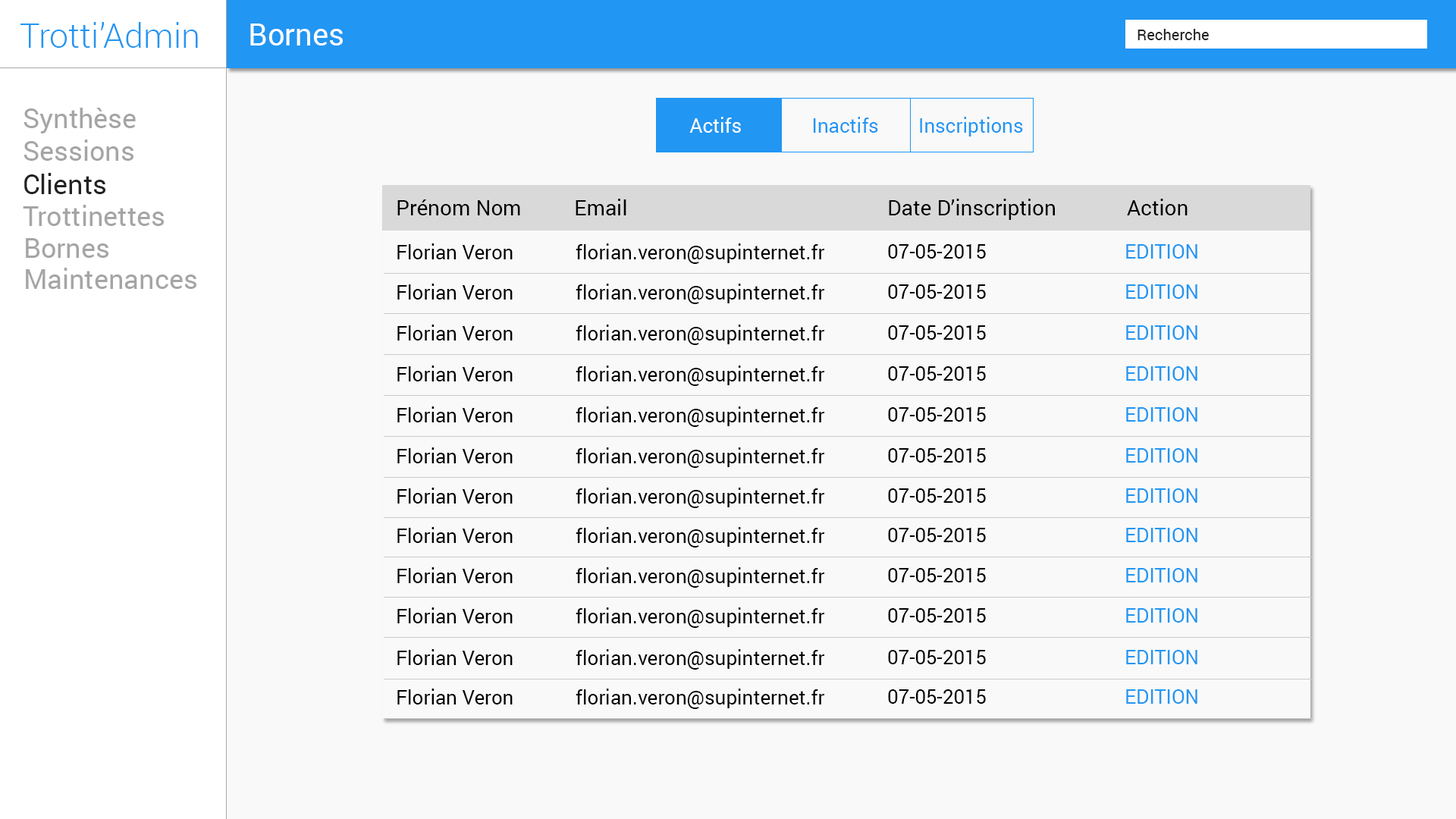
<style>
.page{position:relative;width:1456px;height:819px;background:#f9f9f9}
.page>*{position:absolute;margin:0}
.t1{font:34.1px "Roboto-Light";color:#2196f3}
.t2{font:30.3px "Roboto-Regular";color:#ffffff}
.t3{font:15.2px "Roboto-Regular";color:#222222}
.t4{font:27.3px "Roboto-Regular";color:#a5a5a5}
.t5{font:19.7px "Roboto-Regular";color:#ffffff}
.t6{font:19.7px "Roboto-Regular";color:#2196f3}
.t7{font:27.3px "Roboto-Regular";color:#222222}
.t8{font:21.2px "Roboto-Regular";color:#010101}
.t9{font:19.7px "Roboto-Regular";color:#000000}
</style>
<div class="page">
<p class="t1" style="left:20px;top:22px;width:178px;height:26px">Trotti’Admin</p>
<p class="t2" style="left:250px;top:24px;width:93px;height:21px">Bornes</p>
<p class="t3" style="left:1137px;top:29px;width:72px;height:11px">Recherche</p>
<p class="t4" style="left:24px;top:108px;width:112px;height:25px">Synthèse</p>
<p class="t5" style="left:689px;top:117px;width:52px;height:16px">Actifs</p>
<p class="t6" style="left:813px;top:117px;width:65px;height:16px">Inactifs</p>
<p class="t6" style="left:920px;top:117px;width:103px;height:19px">Inscriptions</p>
<p class="t4" style="left:24px;top:140px;width:109px;height:21px">Sessions</p>
<p class="t7" style="left:24px;top:173px;width:81px;height:21px">Clients</p>
<p class="t4" style="left:23px;top:205px;width:141px;height:21px">Trottinettes</p>
<p class="t8" style="left:397px;top:199px;width:123px;height:16px">Prénom Nom</p>
<p class="t8" style="left:576px;top:199px;width:50px;height:16px">Email</p>
<p class="t8" style="left:889px;top:199px;width:166px;height:21px">Date D’inscription</p>
<p class="t8" style="left:1127px;top:199px;width:61px;height:16px">Action</p>
<p class="t4" style="left:26px;top:238px;width:82px;height:20px">Bornes</p>
<p class="t9" style="left:397px;top:243px;width:116px;height:16px">Florian Veron</p>
<p class="t9" style="left:576px;top:243px;width:249px;height:21px">florian.veron@supinternet.fr</p>
<p class="t9" style="left:888px;top:244px;width:98px;height:15px">07-05-2015</p>
<p class="t6" style="left:1126px;top:244px;width:71px;height:15px">EDITION</p>
<p class="t4" style="left:26px;top:268px;width:170px;height:21px">Maintenances</p>
<p class="t9" style="left:397px;top:284px;width:116px;height:16px">Florian Veron</p>
<p class="t9" style="left:576px;top:284px;width:249px;height:20px">florian.veron@supinternet.fr</p>
<p class="t9" style="left:888px;top:284px;width:98px;height:15px">07-05-2015</p>
<p class="t6" style="left:1126px;top:284px;width:71px;height:15px">EDITION</p>
<p class="t9" style="left:397px;top:325px;width:116px;height:15px">Florian Veron</p>
<p class="t9" style="left:576px;top:325px;width:249px;height:20px">florian.veron@supinternet.fr</p>
<p class="t9" style="left:888px;top:325px;width:98px;height:15px">07-05-2015</p>
<p class="t6" style="left:1126px;top:325px;width:71px;height:15px">EDITION</p>
<p class="t9" style="left:397px;top:366px;width:116px;height:15px">Florian Veron</p>
<p class="t9" style="left:576px;top:366px;width:249px;height:20px">florian.veron@supinternet.fr</p>
<p class="t9" style="left:888px;top:366px;width:98px;height:15px">07-05-2015</p>
<p class="t6" style="left:1126px;top:366px;width:71px;height:15px">EDITION</p>
<p class="t9" style="left:397px;top:406px;width:116px;height:16px">Florian Veron</p>
<p class="t9" style="left:576px;top:406px;width:249px;height:21px">florian.veron@supinternet.fr</p>
<p class="t9" style="left:888px;top:407px;width:98px;height:15px">07-05-2015</p>
<p class="t6" style="left:1126px;top:407px;width:71px;height:15px">EDITION</p>
<p class="t9" style="left:397px;top:447px;width:116px;height:16px">Florian Veron</p>
<p class="t9" style="left:576px;top:447px;width:249px;height:21px">florian.veron@supinternet.fr</p>
<p class="t9" style="left:888px;top:448px;width:98px;height:15px">07-05-2015</p>
<p class="t6" style="left:1126px;top:448px;width:71px;height:15px">EDITION</p>
<p class="t9" style="left:397px;top:488px;width:116px;height:16px">Florian Veron</p>
<p class="t9" style="left:576px;top:488px;width:249px;height:20px">florian.veron@supinternet.fr</p>
<p class="t9" style="left:888px;top:488px;width:98px;height:15px">07-05-2015</p>
<p class="t6" style="left:1126px;top:488px;width:71px;height:15px">EDITION</p>
<p class="t9" style="left:397px;top:527px;width:116px;height:16px">Florian Veron</p>
<p class="t9" style="left:576px;top:527px;width:249px;height:21px">florian.veron@supinternet.fr</p>
<p class="t9" style="left:888px;top:528px;width:98px;height:14px">07-05-2015</p>
<p class="t6" style="left:1126px;top:528px;width:71px;height:14px">EDITION</p>
<p class="t9" style="left:397px;top:567px;width:116px;height:16px">Florian Veron</p>
<p class="t9" style="left:576px;top:567px;width:249px;height:21px">florian.veron@supinternet.fr</p>
<p class="t9" style="left:888px;top:568px;width:98px;height:14px">07-05-2015</p>
<p class="t6" style="left:1126px;top:568px;width:71px;height:14px">EDITION</p>
<p class="t9" style="left:397px;top:607px;width:116px;height:16px">Florian Veron</p>
<p class="t9" style="left:576px;top:607px;width:249px;height:21px">florian.veron@supinternet.fr</p>
<p class="t9" style="left:888px;top:608px;width:98px;height:15px">07-05-2015</p>
<p class="t6" style="left:1126px;top:608px;width:71px;height:15px">EDITION</p>
<p class="t9" style="left:397px;top:649px;width:116px;height:16px">Florian Veron</p>
<p class="t9" style="left:576px;top:649px;width:249px;height:21px">florian.veron@supinternet.fr</p>
<p class="t9" style="left:888px;top:650px;width:98px;height:14px">07-05-2015</p>
<p class="t6" style="left:1126px;top:650px;width:71px;height:14px">EDITION</p>
<p class="t9" style="left:397px;top:689px;width:116px;height:15px">Florian Veron</p>
<p class="t9" style="left:576px;top:689px;width:249px;height:20px">florian.veron@supinternet.fr</p>
<p class="t9" style="left:888px;top:689px;width:98px;height:15px">07-05-2015</p>
<p class="t6" style="left:1126px;top:689px;width:71px;height:15px">EDITION</p>
</div>
